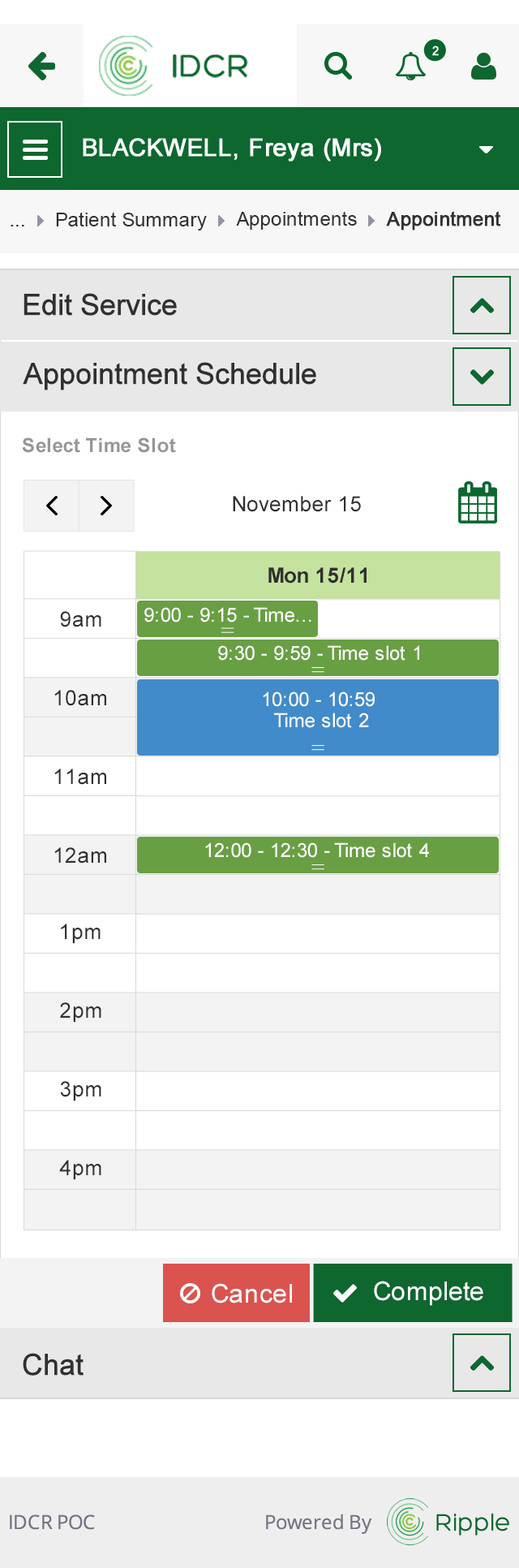
<style>
.page{position:relative;width:519px;height:1568px;background:#ffffff}
.page>*{position:absolute;margin:0}
.t1{font:19.5px "ArialMT";color:#313131}
.t2{font:19.5px "ArialMT";color:#313131;font-weight:bold}
.t3{font:29.2px "ArialMT";color:#303030;font-weight:bold}
.t4{font:19.5px "Arial-BoldMT";color:#959595}
.t5{font:21.1px "ArialMT";color:#303030}
.t6{font:21.1px "Arial-BoldMT";color:#303030}
.t7{font:19.5px "ArialMT";color:#fefefe}
.t8{font:19.5px/20.7px "ArialMT";color:#fefefe}
.t9{font:26px "ArialMT";color:#ffffff}
</style>
<div class="page">
<p class="t1" style="left:56px;top:212px;width:151px;height:18px">Patient Summary</p>
<p class="t1" style="left:236px;top:211px;width:121px;height:19px">Appointments</p>
<p class="t2" style="left:386px;top:211px;width:116px;height:19px">Appointment</p>
<p class="t1" style="left:11px;top:225px;width:13px;height:1px">...</p>
<p class="t3" style="left:24px;top:293px;width:153px;height:23px">Edit Service</p>
<p class="t3" style="left:23px;top:362px;width:294px;height:28px">Appointment Schedule</p>
<p class="t4" style="left:22px;top:437px;width:154px;height:16px">Select Time Slot</p>
<p class="t5" style="left:233px;top:496px;width:128px;height:16px">November 15</p>
<p class="t6" style="left:269px;top:567px;width:98px;height:17px">Mon 15/11</p>
<p class="t5" style="left:60px;top:611px;width:41px;height:16px">9am</p>
<p class="t7" style="left:144px;top:607px;width:168px;height:15px">9:00 - 9:15 - Time...</p>
<p class="t7" style="left:218px;top:645px;width:202px;height:16px">9:30 - 9:59 - Time slot 1</p>
<p class="t5" style="left:54px;top:690px;width:52px;height:16px">10am</p>
<p class="t8" style="left:263px;top:691px;width:112px;height:37px;text-align:center">10:00 - 10:59 <br>Time slot 2</p>
<p class="t5" style="left:54px;top:769px;width:52px;height:16px">11am</p>
<p class="t7" style="left:205px;top:842px;width:224px;height:16px">12:00 - 12:30 - Time slot 4</p>
<p class="t5" style="left:54px;top:847px;width:52px;height:17px">12am</p>
<p class="t5" style="left:61px;top:924px;width:40px;height:20px">1pm</p>
<p class="t5" style="left:60px;top:1002px;width:41px;height:21px">2pm</p>
<p class="t5" style="left:60px;top:1081px;width:41px;height:20px">3pm</p>
<p class="t5" style="left:59px;top:1160px;width:42px;height:20px">4pm</p>
<p class="t9" style="left:212px;top:1283px;width:80px;height:20px">Cancel</p>
<p class="t9" style="left:374px;top:1281px;width:110px;height:25px">Complete</p>
<p class="t3" style="left:23px;top:1353px;width:61px;height:23px">Chat</p>
</div>
